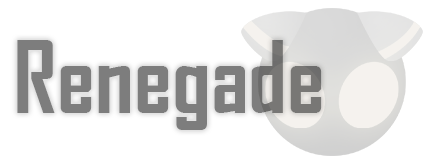
<style>
.page{position:relative;width:432px;height:163px;background:#ffffff}
.page>*{position:absolute;margin:0}
.t1{font:95.1px "AgencyFB-Bold";color:#7d7d7d}
</style>
<div class="page">
<p class="t1" style="left:17px;top:40px;width:305px;height:90px">Renegade</p>
</div>
